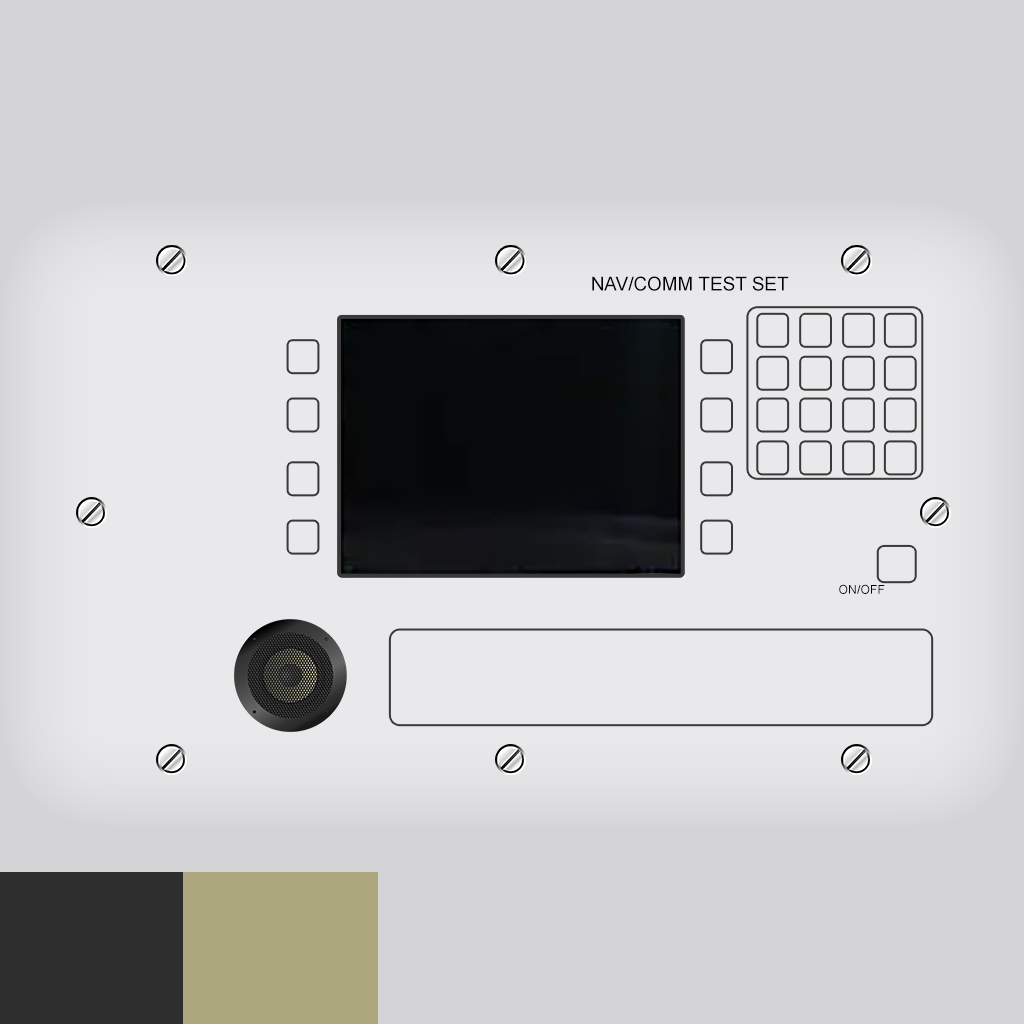
<style>
.page{position:relative;width:1024px;height:1024px;background:#d4d3d6}
.page>*{position:absolute;margin:0}
.t1{font:18.9px "ArialMT";color:#000000}
.t2{font:12.3px "ArialMT";color:#000000}
</style>
<div class="page">
<p class="t1" style="left:592px;top:276px;width:197px;height:15px">NAV/COMM TEST SET</p>
<p class="t2" style="left:839px;top:584px;width:46px;height:10px">ON/OFF</p>
</div>
